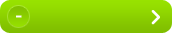
<style>
.page{position:relative;width:172px;height:33px}
.page>*{position:absolute;margin:0}
.t1{font:20.6px "MyriadPro-Bold";color:#ffffff}
</style>
<div class="page">
<p class="t1" style="left:16px;top:15px;width:6px;height:3px">-</p>
</div>
